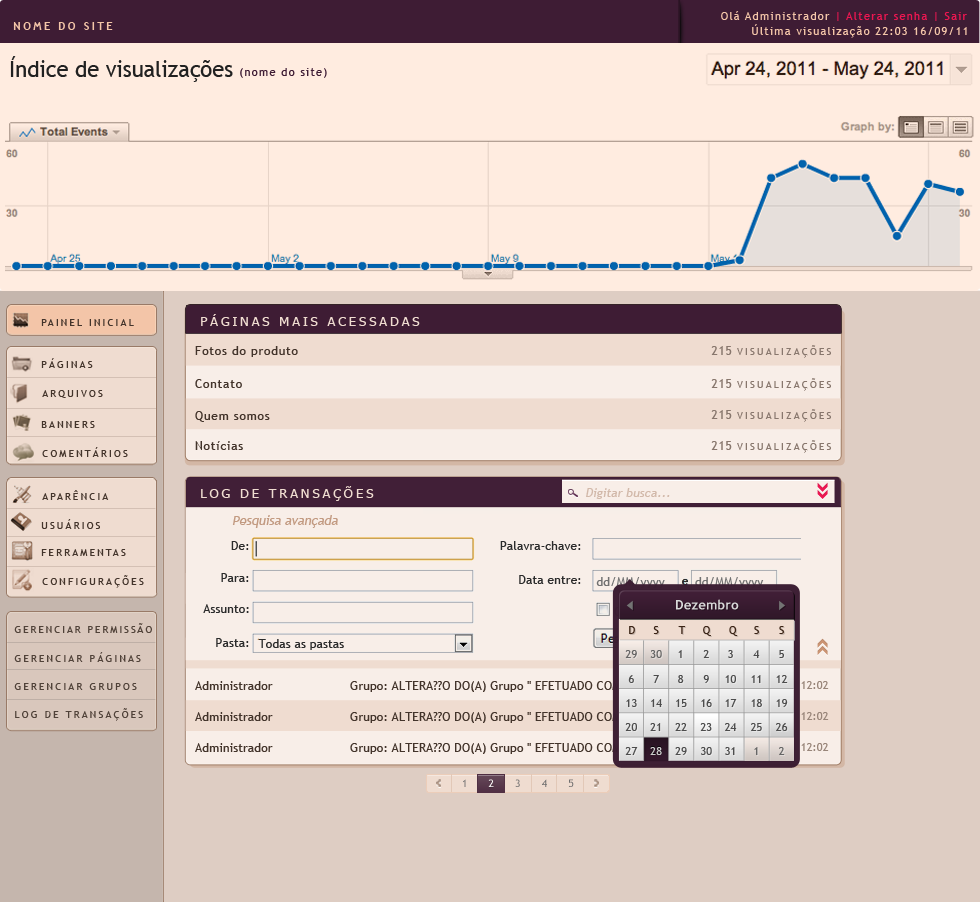
<style>
.page{position:relative;width:980px;height:902px;background:#ffece0}
.page>*{position:absolute;margin:0}
.t1{font:11.3px "TrebuchetMS";letter-spacing:0.1em;color:#ed1651}
.t2{font:11.3px "TrebuchetMS";letter-spacing:0.1em;color:#f3c5a8}
.t3{font:11.3px "TrebuchetMS-Bold";letter-spacing:0.2em;color:#f3c5a8;text-transform:uppercase}
.t4{font:21.9px "TrebuchetMS";color:#212121}
.t5{font:11.3px "TrebuchetMS";letter-spacing:0.1em;color:#3e1c34}
.t6{font:13.3px "Tahoma";letter-spacing:0.2em;color:#efdcd0;text-transform:uppercase}
.t7{font:10.3px "TrebuchetMS";letter-spacing:0.2em;color:#43342b;text-transform:uppercase}
.t8{font:12.3px "TrebuchetMS";letter-spacing:0.05em;color:#43342b}
.t9{font:10.3px "TrebuchetMS";letter-spacing:0.2em;color:#88776d;text-transform:uppercase}
.t10{font:12.3px "TrebuchetMS";letter-spacing:0.05em;color:#88776d;text-transform:uppercase}
.t11{font:12.3px "TrebuchetMS";color:#d2b9aa;font-style:italic}
.t12{font:12.7px "TrebuchetMS";color:#c29a81;font-style:italic}
.t13{font:12.3px "TrebuchetMS";color:#2b2b2b}
.t14{font:12.3px "TrebuchetMS";color:#717171}
.t15{font:13.3px "TrebuchetMS-Bold";color:#d9d9d9}
.t16{font:10.3px "TrebuchetMS";letter-spacing:0.18em;color:#504239;text-transform:uppercase}
.t17{font:11.3px "TrebuchetMS";color:#3b2416}
.t18{font:10.3px "TrebuchetMS";letter-spacing:0.2em;color:#504239;text-transform:uppercase}
.t19{font:11.3px "TrebuchetMS";color:#666666}
.t20{font:11.3px "TrebuchetMS";color:#4d4d4d}
.t21{font:12.3px "TrebuchetMS";color:#43342b}
.t22{font:11.3px "TrebuchetMS";color:#cccccc}
.t23{font:10.4px "TrebuchetMS"}
.t24{font:10.4px "TrebuchetMS";color:#ffffff}
.t25{font:10.4px "TrebuchetMS";color:#706f6f}
</style>
<div class="page">
<p class="t1" style="left:721px;top:11px;width:246px;height:10px"><span class="t2">Olá Administrador </span>| Alterar senha | Sair</p>
<p class="t3" style="left:13px;top:22px;width:100px;height:8px">NOME DO SITE</p>
<p class="t2" style="left:752px;top:24px;width:215px;height:14px">Última visualização 22:03 16/09/11</p>
<p class="t4" style="left:10px;top:56px;width:223px;height:26px">Índice de visualizações</p>
<p class="t5" style="left:240px;top:68px;width:87px;height:10px">(nome do site)</p>
<p class="t6" style="left:201px;top:314px;width:219px;height:12px">Páginas mais acessadas</p>
<p class="t7" style="left:41px;top:319px;width:93px;height:7px">Painel Inicial</p>
<p class="t8" style="left:195px;top:346px;width:103px;height:11px">Fotos do produto</p>
<p class="t9" style="left:711px;top:345px;width:120px;height:13px"><span class="t10">215 </span>visualizações</p>
<p class="t7" style="left:41px;top:358px;width:52px;height:10px">Páginas</p>
<p class="t7" style="left:42px;top:390px;width:61px;height:8px">Arquivos</p>
<p class="t8" style="left:195px;top:379px;width:47px;height:9px">Contato</p>
<p class="t9" style="left:711px;top:378px;width:120px;height:13px"><span class="t10">215 </span>visualizações</p>
<p class="t8" style="left:195px;top:411px;width:75px;height:11px">Quem somos</p>
<p class="t9" style="left:711px;top:409px;width:120px;height:13px"><span class="t10">215 </span>visualizações</p>
<p class="t7" style="left:41px;top:421px;width:54px;height:7px">Banners</p>
<p class="t7" style="left:42px;top:447px;width:86px;height:10px">Comentários</p>
<p class="t8" style="left:195px;top:441px;width:48px;height:9px">Notícias</p>
<p class="t9" style="left:711px;top:440px;width:120px;height:13px"><span class="t10">215 </span>visualizações</p>
<p class="t6" style="left:201px;top:486px;width:173px;height:15px">log de transações</p>
<p class="t7" style="left:42px;top:490px;width:67px;height:10px">Aparência</p>
<p class="t11" style="left:586px;top:488px;width:84px;height:11px">Digitar busca...</p>
<p class="t7" style="left:41px;top:519px;width:59px;height:10px">Usuários</p>
<p class="t12" style="left:232px;top:515px;width:106px;height:13px">Pesquisa avançada</p>
<p class="t13" style="left:231px;top:541px;width:18px;height:9px">De:</p>
<p class="t13" style="left:500px;top:541px;width:81px;height:9px">Palavra-chave:</p>
<p class="t7" style="left:41px;top:549px;width:85px;height:7px">Ferramentas</p>
<p class="t7" style="left:42px;top:575px;width:102px;height:13px">Configurações</p>
<p class="t13" style="left:221px;top:573px;width:28px;height:9px">Para:</p>
<p class="t13" style="left:519px;top:575px;width:62px;height:9px">Data entre:</p>
<p class="t14" style="left:596px;top:577px;width:69px;height:11px">dd/MM/yyyy</p>
<p class="t13" style="left:682px;top:579px;width:6px;height:6px">e</p>
<p class="t13" style="left:203px;top:604px;width:46px;height:9px">Assunto:</p>
<p class="t15" style="left:676px;top:599px;width:63px;height:11px">Dezembro</p>
<p class="t16" style="left:14px;top:623px;width:138px;height:10px">Gerenciar permissão</p>
<p class="t17" style="left:629px;top:626px;width:6px;height:8px">D</p>
<p class="t17" style="left:653px;top:626px;width:6px;height:8px">S</p>
<p class="t17" style="left:678px;top:626px;width:8px;height:8px">T</p>
<p class="t17" style="left:703px;top:626px;width:8px;height:10px">Q</p>
<p class="t17" style="left:729px;top:626px;width:9px;height:10px">Q</p>
<p class="t17" style="left:754px;top:626px;width:5px;height:8px">S</p>
<p class="t17" style="left:779px;top:626px;width:5px;height:8px">S</p>
<p class="t13" style="left:216px;top:638px;width:33px;height:9px">Pasta:</p>
<p class="t13" style="left:258px;top:639px;width:86px;height:11px">Todas as pastas</p>
<p class="t18" style="left:14px;top:652px;width:127px;height:10px">Gerenciar páginas</p>
<p class="t19" style="left:625px;top:650px;width:12px;height:8px">29</p>
<p class="t19" style="left:650px;top:650px;width:12px;height:8px">30</p>
<p class="t20" style="left:678px;top:650px;width:4px;height:8px">1</p>
<p class="t20" style="left:703px;top:650px;width:6px;height:8px">2</p>
<p class="t20" style="left:728px;top:650px;width:5px;height:8px">3</p>
<p class="t20" style="left:753px;top:650px;width:7px;height:8px">4</p>
<p class="t20" style="left:779px;top:650px;width:5px;height:8px">5</p>
<p class="t20" style="left:628px;top:675px;width:6px;height:8px">6</p>
<p class="t20" style="left:653px;top:675px;width:6px;height:8px">7</p>
<p class="t20" style="left:678px;top:675px;width:6px;height:8px">8</p>
<p class="t20" style="left:703px;top:675px;width:6px;height:8px">9</p>
<p class="t20" style="left:725px;top:675px;width:11px;height:8px">10</p>
<p class="t20" style="left:751px;top:675px;width:10px;height:8px">11</p>
<p class="t20" style="left:776px;top:675px;width:12px;height:8px">12</p>
<p class="t18" style="left:14px;top:683px;width:123px;height:7px">Gerenciar grupos</p>
<p class="t21" style="left:195px;top:681px;width:78px;height:9px">Administrador</p>
<p class="t21" style="left:350px;top:681px;width:326px;height:11px">Grupo: ALTERA??O DO(A) Grupo '' EFETUADO COM SUCESSO!</p>
<p class="t20" style="left:626px;top:699px;width:11px;height:8px">13</p>
<p class="t20" style="left:651px;top:699px;width:11px;height:8px">14</p>
<p class="t20" style="left:676px;top:699px;width:11px;height:8px">15</p>
<p class="t20" style="left:701px;top:699px;width:11px;height:8px">16</p>
<p class="t20" style="left:725px;top:699px;width:12px;height:8px">17</p>
<p class="t20" style="left:751px;top:699px;width:11px;height:8px">18</p>
<p class="t20" style="left:776px;top:699px;width:12px;height:8px">19</p>
<p class="t18" style="left:15px;top:708px;width:128px;height:13px">Log de transações</p>
<p class="t21" style="left:195px;top:712px;width:78px;height:9px">Administrador</p>
<p class="t21" style="left:350px;top:712px;width:326px;height:11px">Grupo: ALTERA??O DO(A) Grupo '' EFETUADO COM SUCESSO!</p>
<p class="t20" style="left:625px;top:723px;width:12px;height:8px">20</p>
<p class="t20" style="left:650px;top:723px;width:11px;height:8px">21</p>
<p class="t20" style="left:675px;top:723px;width:12px;height:8px">22</p>
<p class="t20" style="left:700px;top:723px;width:12px;height:8px">23</p>
<p class="t20" style="left:725px;top:723px;width:12px;height:8px">24</p>
<p class="t20" style="left:751px;top:723px;width:11px;height:8px">25</p>
<p class="t20" style="left:776px;top:723px;width:12px;height:8px">26</p>
<p class="t21" style="left:195px;top:743px;width:78px;height:9px">Administrador</p>
<p class="t21" style="left:350px;top:743px;width:326px;height:11px">Grupo: ALTERA??O DO(A) Grupo '' EFETUADO COM SUCESSO!</p>
<p class="t20" style="left:625px;top:747px;width:13px;height:8px">27</p>
<p class="t22" style="left:650px;top:747px;width:12px;height:8px">28</p>
<p class="t20" style="left:675px;top:747px;width:12px;height:8px">29</p>
<p class="t20" style="left:701px;top:747px;width:11px;height:8px">30</p>
<p class="t20" style="left:725px;top:747px;width:10px;height:8px">31</p>
<p class="t19" style="left:754px;top:747px;width:4px;height:8px">1</p>
<p class="t19" style="left:779px;top:747px;width:6px;height:8px">2</p>
<p class="t23" style="left:463px;top:779px;width:3px;height:8px">1</p>
<p class="t24" style="left:488px;top:779px;width:6px;height:8px">2</p>
<p class="t23" style="left:515px;top:779px;width:5px;height:8px">3</p>
<p class="t25" style="left:542px;top:779px;width:5px;height:8px">4</p>
<p class="t25" style="left:568px;top:779px;width:6px;height:8px">5</p>
</div>
